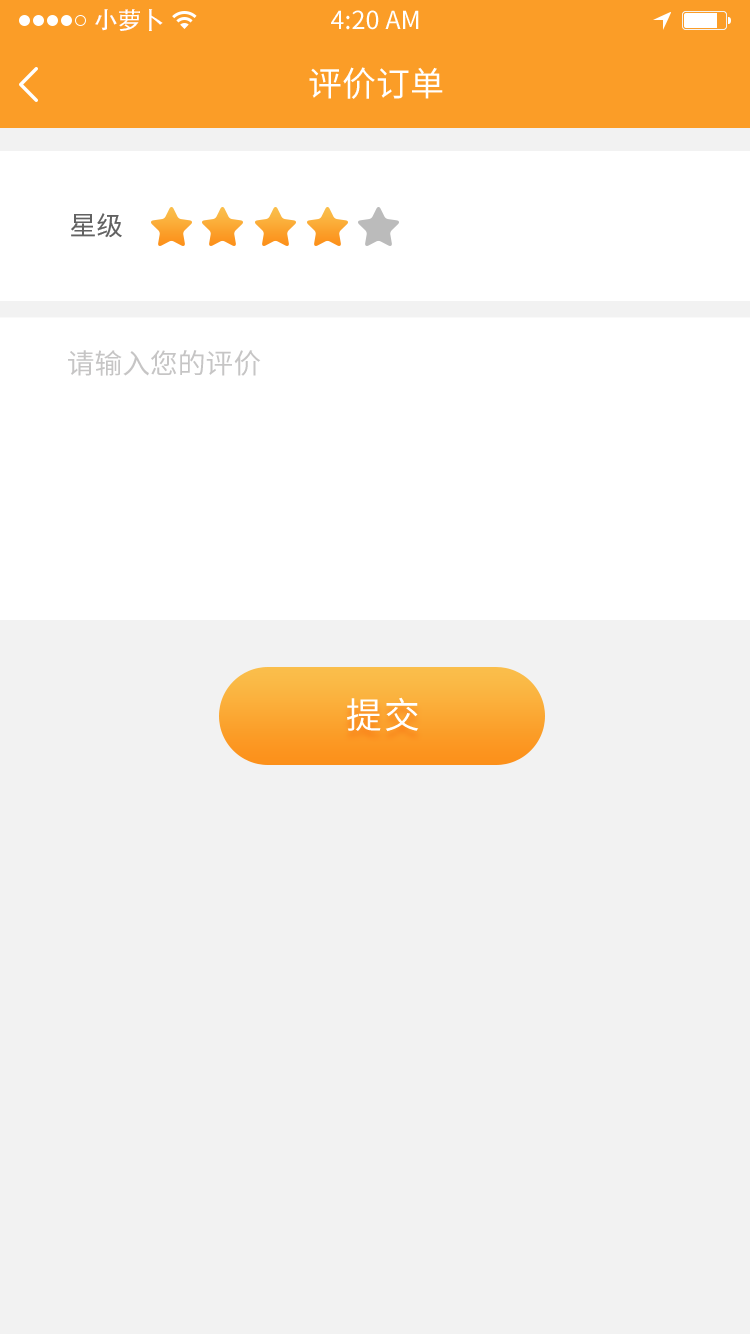
<style>
.page{position:relative;width:750px;height:1334px;background:#f2f2f2}
.page>*{position:absolute;margin:0}
.t1{font:24px "AdobeHeitiStd-Regular";color:#ffffff}
.t2{font:25px "SourceHanSansCN-Regular";color:#ffffff}
.t3{font:34px "SourceHanSansCN-Regular";color:#ffffff}
.t4{font:26.4px "SourceHanSansCN-Regular";color:#626262}
.t5{font:27.8px "SourceHanSansCN-Regular";color:#c6c5c5}
.t6{font:36px "SourceHanSansCN-Regular";letter-spacing:0.06em;color:#ffffff}
</style>
<div class="page">
<p class="t1" style="left:95px;top:9px;width:68px;height:22px">小萝卜</p>
<p class="t2" style="left:331px;top:10px;width:88px;height:20px">4:20 AM</p>
<p class="t3" style="left:309px;top:67px;width:134px;height:32px">评价订单</p>
<p class="t4" style="left:71px;top:213px;width:51px;height:25px">星级</p>
<p class="t5" style="left:68px;top:350px;width:193px;height:26px">请输入您的评价</p>
<p class="t6" style="left:347px;top:697px;width:72px;height:35px">提交</p>
</div>
